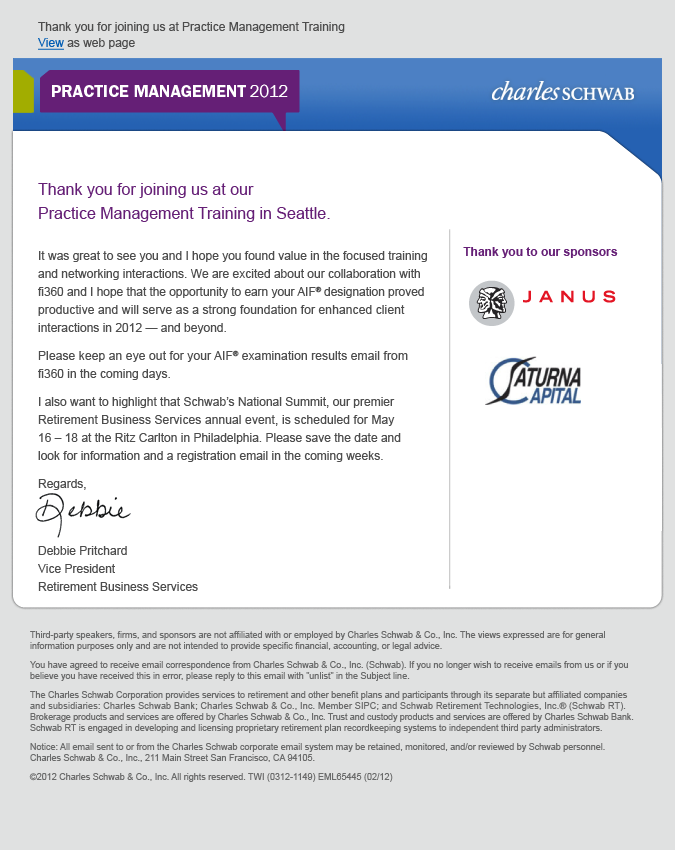
<style>
.page{position:relative;width:675px;height:850px;background:#ffffff}
.page>*{position:absolute;margin:0}
.t1{font:12px/16px "ArialMT";color:#4d4d4d}
.t2{font:12px/16px "ArialMT";color:#005cb3;text-decoration:underline}
.t3{font:12px/18px "ArialMT";color:#4d4d4d}
.t4{font:16px/24px "ArialMT";color:#651f76}
.t5{font:12px/18px "ArialMT";letter-spacing:-0.005em;color:#4d4d4d}
.t6{font:12px/18px "ArialMT";letter-spacing:0.01em;color:#4d4d4d}
.t7{font:12px "Arial-BoldMT";color:#651f76}
.t8{font:9px "ArialMT";color:#6a6b6b}
.t9{font:9px "ArialMT";letter-spacing:0.015em;color:#6a6b6b}
.t10{font:9px "ArialMT";letter-spacing:-0.01em;color:#6a6b6b}
</style>
<div class="page">
<p class="t1" style="left:38px;top:22px;width:307px;height:28px">Thank you for joining us at Practice Management Training<br><span class="t2">View</span> as web page</p>
<p class="t3" style="left:38px;top:183px;width:389px;height:408px"><span class="t4">Thank you for joining us at our <br>Practice Management Training in Seattle.<br></span><br>It was great to see you and I hope you found value in the focused training and networking interactions. We are excited about our collaboration with <span class="t5">fi360 and I hope that the opportunity to earn your AIF® designation proved </span><span class="t6">productive and will serve as a strong foundation for enhanced client </span>interactions in 2012 — and beyond.<br><span class="t6">Please keep an eye out for your AIF® examination results email from </span>fi360 in the coming days.<br>I also want to highlight that Schwab’s National Summit, our premier <span class="t6">Retirement Business Services annual event, is scheduled for May <br></span>16 – 18 at the Ritz Carlton in Philadelphia. Please save the date and <br>look for information and a registration email in the coming weeks.<br>Regards,<br><br>Debbie Pritchard<br>Vice President<br>Retirement Business Services</p>
<p class="t7" style="left:463px;top:247px;width:155px;height:11px">Thank you to our sponsors</p>
<p class="t8" style="left:29px;top:631px;width:605px;height:151px">Third-party speakers, firms, and sponsors are not affiliated with or employed by Charles Schwab &amp; Co., Inc. The views expressed are for general information purposes only and are not intended to provide specific financial, accounting, or legal advice.<br>You have agreed to receive email correspondence from Charles Schwab &amp; Co., Inc. (Schwab). If you no longer wish to receive emails from us or if you believe you have received this in error, please reply to this email with "unlist" in the Subject line.<br>The Charles Schwab Corporation provides services to retirement and other benefit plans and participants through its separate but affiliated companies <span class="t9">and subsidiaries: Charles Schwab Bank; Charles Schwab &amp; Co., Inc. Member SIPC; and Schwab Retirement Technologies, Inc.® (Schwab RT). </span><span class="t10">Brokerage products and services are offered by Charles Schwab &amp; Co., Inc. Trust and custody products and services are offered by Charles Schwab Bank</span>. Schwab RT is engaged in developing and licensing proprietary retirement plan recordkeeping systems to independent third party administrators.<br>Notice: All email sent to or from the Charles Schwab corporate email system may be retained, monitored, and/or reviewed by Schwab personnel. <br>Charles Schwab &amp; Co., Inc., 211 Main Street San Francisco, CA 94105.<br>©2012 Charles Schwab &amp; Co., Inc. All rights reserved. TWI (0312-1149) EML65445 (02/12)</p>
</div>
